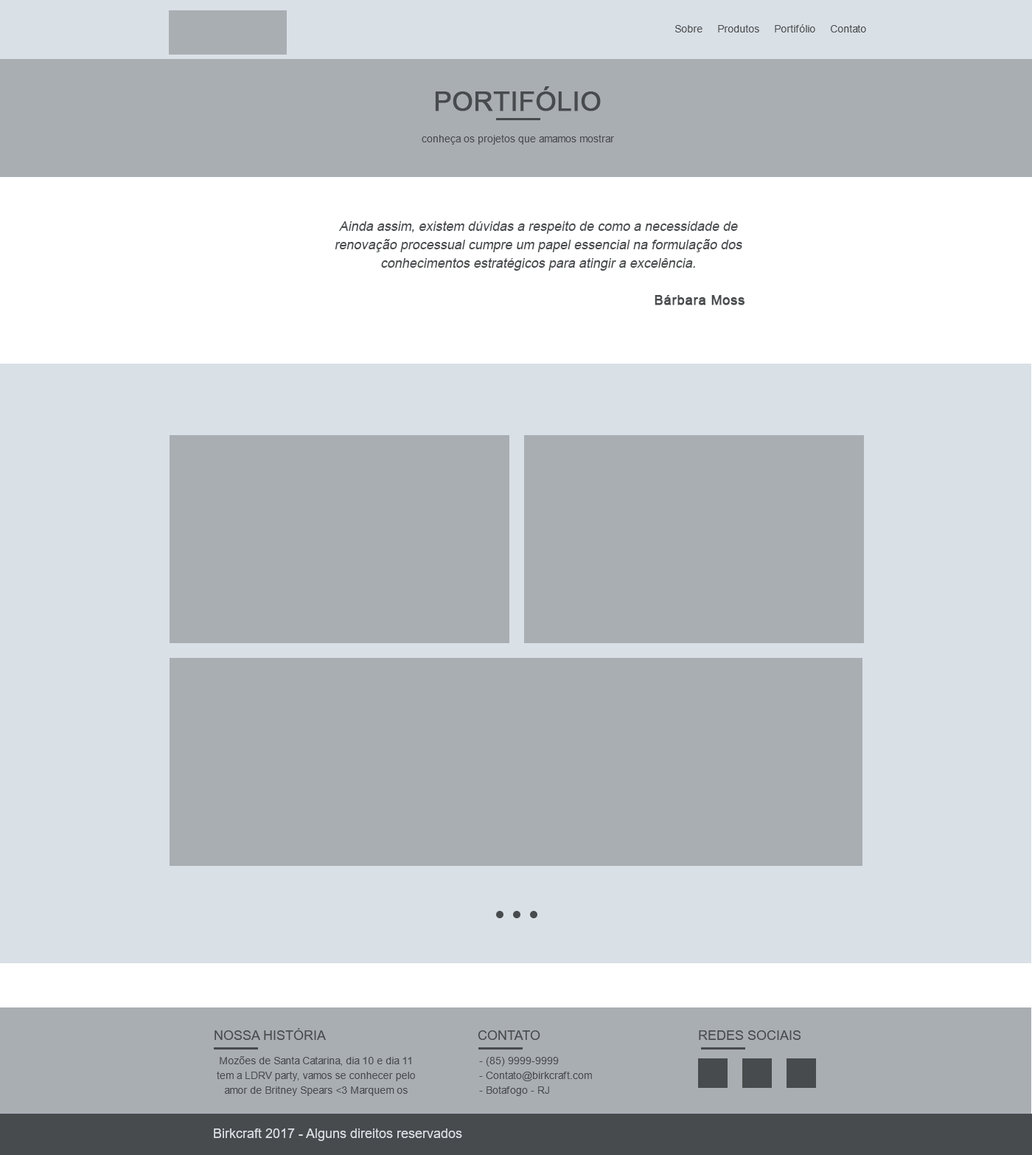
<style>
.page{position:relative;width:1032px;height:1155px;background:#a9aeb3}
.page>*{position:absolute;margin:0}
.t1{font:10.3px "ArialMT";color:#484b4d}
.t2{font:26.5px "ArialMT";color:#484b4d;text-transform:uppercase;font-weight:bold}
.t3{font:13.3px/18.4px "ArialMT";color:#484b4d;font-style:italic}
.t4{font:13.3px/18.4px "ArialMT";color:#484b4d;font-weight:bold}
.t5{font:13.3px "ArialMT";color:#484b4d;text-transform:uppercase}
.t6{font:10.3px/14.7px "ArialMT";color:#484b4d}
.t7{font:10.3px/14.7px "ArialMT";color:#d9e0e6}
.t8{font:13.3px "ArialMT";color:#d9e0e6}
</style>
<div class="page">
<p class="t1" style="left:676px;top:24px;width:191px;height:8px">Sobre     Produtos     Portifólio     Contato</p>
<p class="t2" style="left:435px;top:86px;width:166px;height:25px">portifólio</p>
<p class="t1" style="left:422px;top:135px;width:192px;height:10px">conheça os projetos que amamos mostrar</p>
<p class="t3" style="left:335px;top:221px;width:410px;height:84px;text-align:center">Ainda assim, existem dúvidas a respeito de como a necessidade de renovação processual cumpre um papel essencial na formulação dos conhecimentos estratégicos para atingir a excelência.<br><br><span class="t4">Bárbara Moss</span></p>
<p class="t5" style="left:215px;top:1028px;width:111px;height:12px">Nossa História</p>
<p class="t5" style="left:478px;top:1030px;width:63px;height:10px">Contato</p>
<p class="t5" style="left:699px;top:1030px;width:102px;height:10px">redes sociais</p>
<p class="t6" style="left:217px;top:1056px;width:198px;height:40px;text-align:center">Mozões de Santa Catarina, dia 10 e dia 11 tem a LDRV party, vamos se conhecer pelo amor de Britney Spears &lt;3 Marquem os <span class="t7">amigos de Balneário e Floripa e confirmem presença no evento a</span></p>
<p class="t6" style="left:479px;top:1057px;width:113px;height:39px">- (85) 9999-9999<br>- Contato@birkcraft.com<br>- Botafogo - RJ</p>
<p class="t8" style="left:214px;top:1128px;width:248px;height:13px">Birkcraft 2017 - Alguns direitos reservados</p>
</div>
